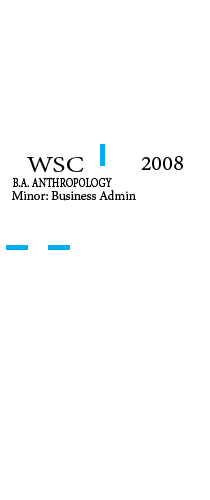
<style>
.page{position:relative;width:210px;height:500px;background:#ffffff}
.page>*{position:absolute;margin:0}
.t1{font:24px "AdobeDevanagari-Regular";color:#000000;scale:1.25 1}
.t2{font:24px "AdobeDevanagari-Regular";color:#000000}
.t3{font:14px "AdobeDevanagari-Regular";color:#000000;scale:0.76 1}
.t4{font:14px "AdobeDevanagari-Regular";color:#000000}
</style>
<div class="page">
<p class="t1" style="left:27px;top:157px;width:57px;height:15px">WSC</p>
<p class="t2" style="left:141px;top:156px;width:42px;height:14px">2008</p>
<p class="t3" style="left:13px;top:177px;width:99px;height:10px">B.A. ANTHROPOLOGY</p>
<p class="t4" style="left:11px;top:190px;width:125px;height:11px">Minor: Business Admin</p>
</div>
